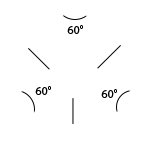
<style>
.page{position:relative;width:150px;height:150px;background:#ffffff}
.page>*{position:absolute;margin:0}
.t1{font:12px "MyriadPro-Regular";color:#000000}
</style>
<div class="page">
<p class="t1" style="left:67px;top:25px;width:16px;height:9px">60°</p>
<p class="t1" style="left:35px;top:86px;width:16px;height:9px">60°</p>
<p class="t1" style="left:101px;top:89px;width:16px;height:9px">60°</p>
</div>
